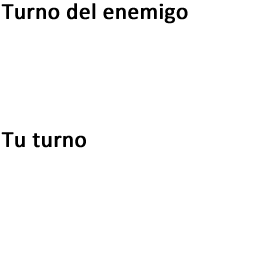
<style>
.page{position:relative;width:256px;height:256px;background:#ffffff}
.page>*{position:absolute;margin:0}
.t1{font:23px "Calibri";color:#000000;font-weight:bold}
</style>
<div class="page">
<p class="t1" style="left:1px;top:3px;width:187px;height:21px">Turno del enemigo</p>
<p class="t1" style="left:1px;top:132px;width:85px;height:16px">Tu turno</p>
</div>
